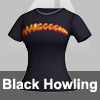
<style>
.page{position:relative;width:100px;height:100px;background:#c2c2c2}
.page>*{position:absolute;margin:0}
.t1{font:14px "Arial-BoldMT";color:#ffffff}
</style>
<div class="page">
<p class="t1" style="left:3px;top:78px;width:94px;height:14px">Black Howling</p>
</div>
